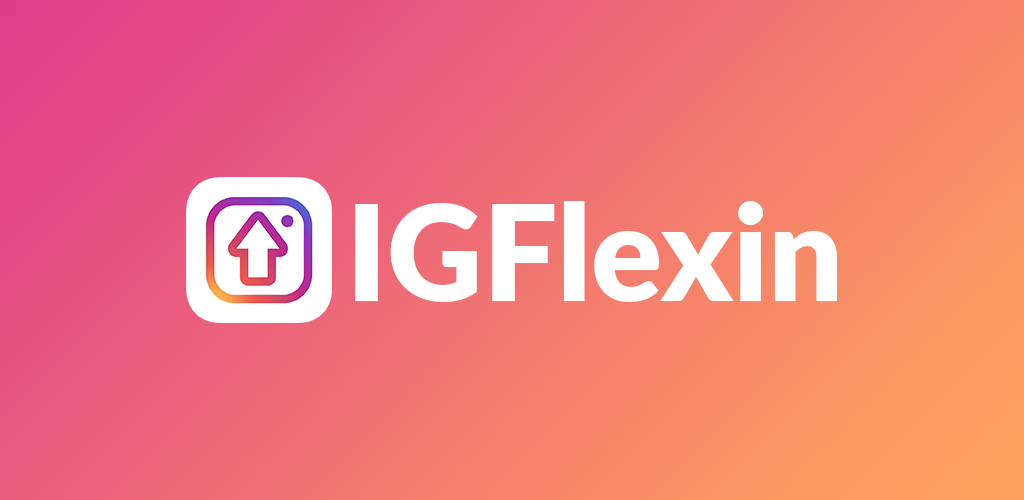
<style>
.page{position:relative;width:1024px;height:500px}
.page>*{position:absolute;margin:0}
.t1{font:132.2px "Lato-Black";color:#ffffff}
</style>
<div class="page">
<p class="t1" style="left:355px;top:201px;width:482px;height:101px">IGFlexin</p>
</div>
